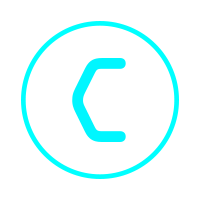
<style>
.page{position:relative;width:200px;height:200px;background:#ffffff}
.page>*{position:absolute;margin:0}
.t1{font:26px "OCRAStd";color:#00f6ff}
</style>
<div class="page">
<p class="t1" style="left:72px;top:58px;width:54px;height:84px">C</p>
</div>
